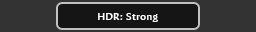
<style>
.page{position:relative;width:256px;height:32px;background:#333333}
.page>*{position:absolute;margin:0}
.t1{font:10px "AmiraParadiso";letter-spacing:0.05em;color:#ffffff}
</style>
<div class="page">
<p class="t1" style="left:98px;top:13px;width:60px;height:9px">HDR: Strong</p>
</div>
